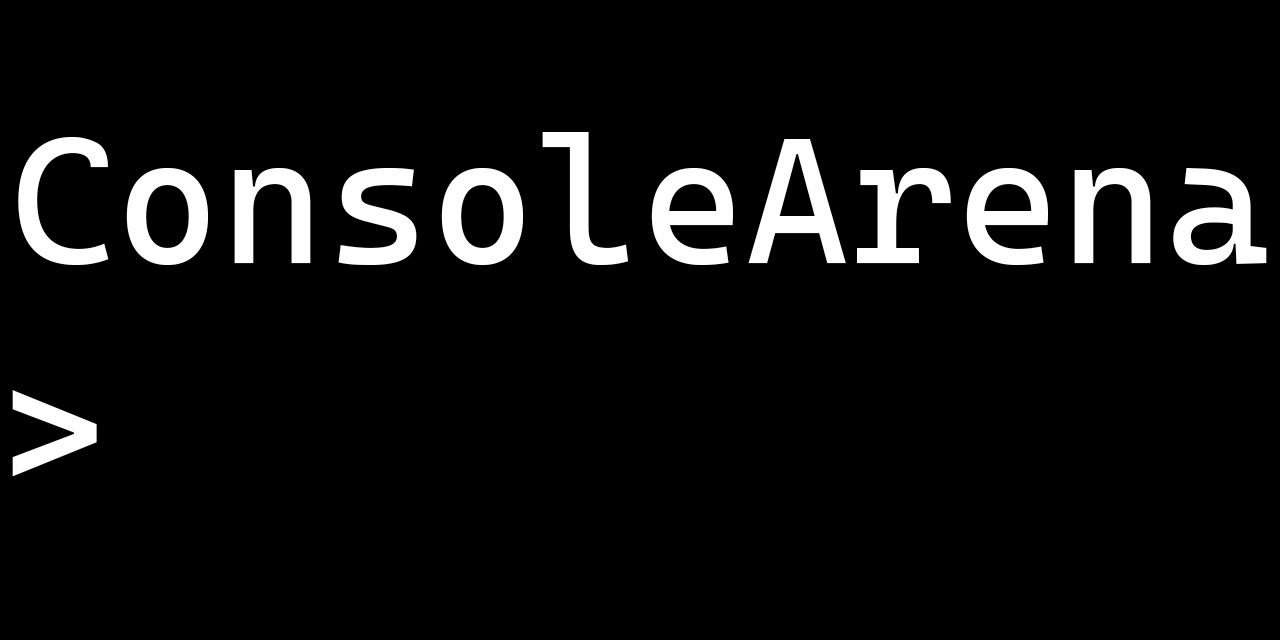
<style>
.page{position:relative;width:1280px;height:640px;background:#000000}
.page>*{position:absolute;margin:0}
.t1{font:179.2px "CascadiaCode";color:#fffefe}
</style>
<div class="page">
<p class="t1" style="left:18px;top:132px;width:1249px;height:133px">ConsoleArena</p>
<p class="t1" style="left:12px;top:390px;width:85px;height:87px">&gt;</p>
</div>
